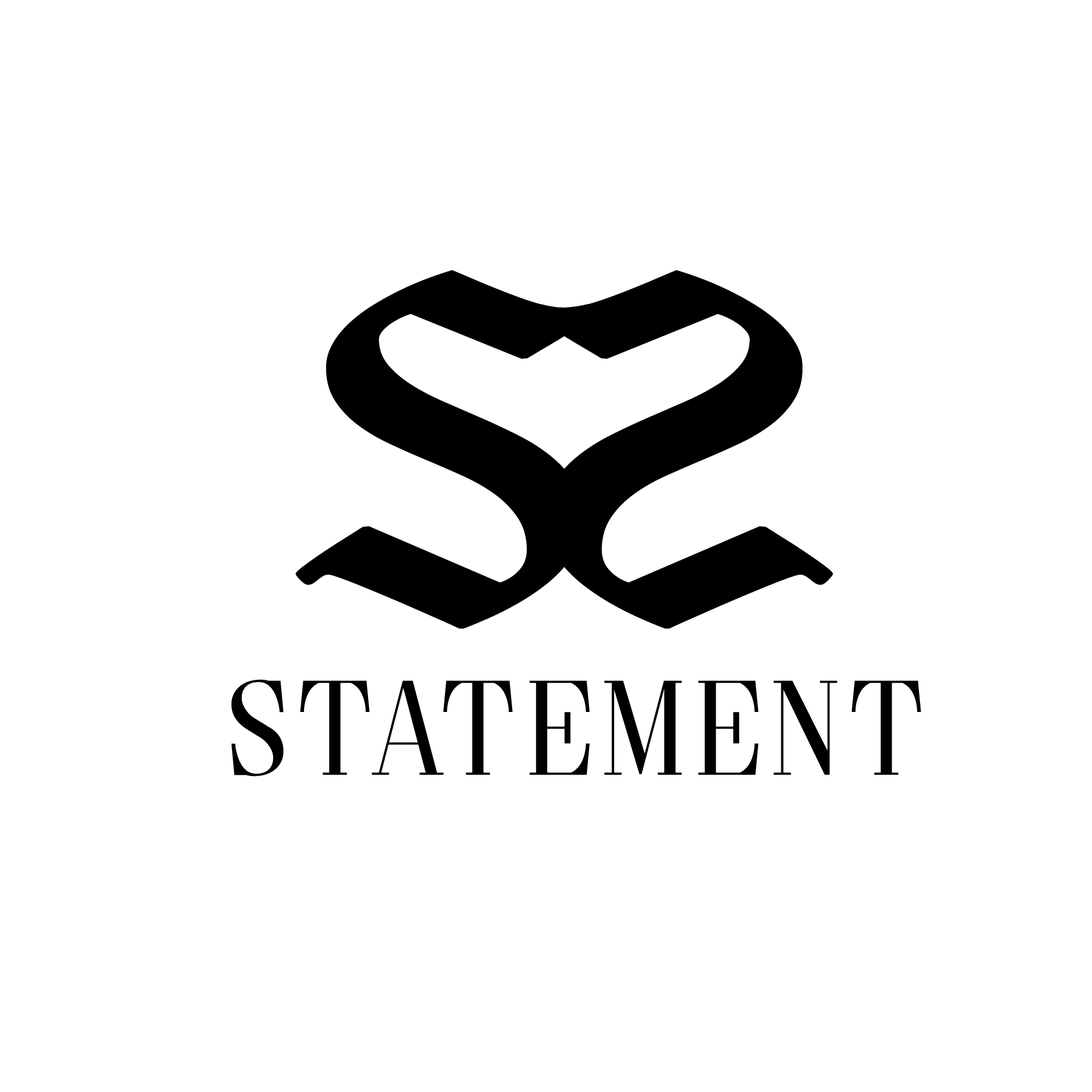
<style>
.page{position:relative;width:1092px;height:1092px;background:#ffffff}
.page>*{position:absolute;margin:0}
.t1{font:136.5px "Goldoni";color:#000000}
</style>
<div class="page">
<p class="t1" style="left:231px;top:679px;width:690px;height:97px">statement</p>
</div>
